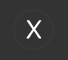
<style>
.page{position:relative;width:68px;height:60px;background:#333333}
.page>*{position:absolute;margin:0}
.t1{font:39.8px "Calibri-Light";color:#ffffff}
</style>
<div class="page">
<p class="t1" style="left:26px;top:20px;width:16px;height:19px">x</p>
</div>
